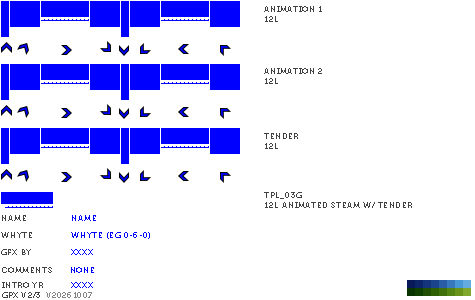
<style>
.page{position:relative;width:475px;height:300px;background:#ffffff}
.page>*{position:absolute;margin:0}
.t1{font:8px "Museo700-Regular";letter-spacing:0.075em;color:#404040;text-transform:uppercase}
.t2{font:8px "Museo700-Regular";letter-spacing:0.075em;color:#0000ff;text-transform:uppercase}
.t3{font:8px "Museo700-Regular";letter-spacing:0.075em;color:#848484;text-transform:uppercase}
</style>
<div class="page">
<p class="t1" style="left:264px;top:6px;width:58px;height:16px">Animation 1<br>12L</p>
<p class="t1" style="left:264px;top:68px;width:58px;height:16px">Animation 2<br>12L</p>
<p class="t1" style="left:264px;top:133px;width:34px;height:16px">tender<br>12l</p>
<p class="t1" style="left:264px;top:192px;width:148px;height:16px">tpl_03g<br>12L animated steam w/ tender</p>
<p class="t1" style="left:2px;top:215px;width:24px;height:6px">name</p>
<p class="t2" style="left:72px;top:215px;width:24px;height:6px">name</p>
<p class="t1" style="left:1px;top:232px;width:31px;height:6px">whyte</p>
<p class="t2" style="left:71px;top:232px;width:79px;height:7px">whyte (eg 0-6-0)</p>
<p class="t1" style="left:1px;top:249px;width:30px;height:6px">gfx by</p>
<p class="t2" style="left:71px;top:249px;width:22px;height:6px">xxxx</p>
<p class="t1" style="left:2px;top:267px;width:50px;height:6px">comments</p>
<p class="t2" style="left:71px;top:267px;width:23px;height:6px">none</p>
<p class="t1" style="left:2px;top:292px;width:38px;height:6px">gpx v2/3</p>
<p class="t1" style="left:2px;top:282px;width:41px;height:6px">intro yr</p>
<p class="t3" style="left:46px;top:292px;width:46px;height:6px">v20261007</p>
<p class="t2" style="left:71px;top:282px;width:22px;height:6px">xxxx</p>
</div>
